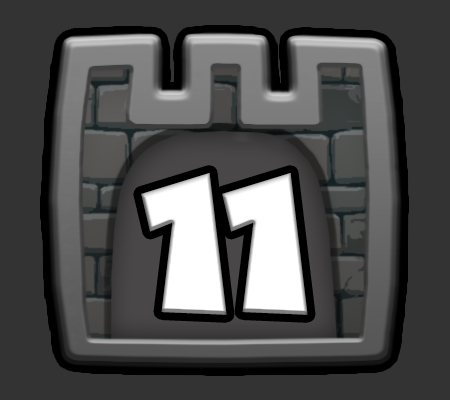
<style>
.page{position:relative;width:450px;height:400px;background:#333333}
.page>*{position:absolute;margin:0}
.t1{font:194px "Funhouse";color:#ffffff}
</style>
<div class="page">
<p class="t1" style="left:141px;top:173px;width:167px;height:142px">11</p>
</div>
